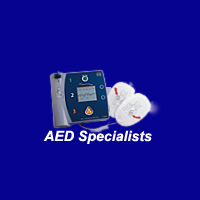
<style>
.page{position:relative;width:200px;height:200px;background:#060391}
.page>*{position:absolute;margin:0}
.t1{font:14.2px "Arial-BoldItalicMT";color:#ffffff}
</style>
<div class="page">
<p class="t1" style="left:43px;top:130px;width:109px;height:14px">AED Specialists</p>
</div>
